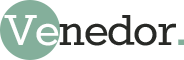
<style>
.page{position:relative;width:184px;height:60px;background:#ffffff}
.page>*{position:absolute;margin:0}
.t1{font:53px "Rokkitt";letter-spacing:-0.025em;color:#282926}
.t2{font:53px "Rokkitt";letter-spacing:-0.025em;color:#ffffff}
.t3{font:53px "Rokkitt";letter-spacing:-0.025em;color:#84af9b}
</style>
<div class="page">
<p class="t1" style="left:4px;top:15px;width:180px;height:31px"><span class="t2">Ve</span>nedor<span class="t3">.</span></p>
</div>
